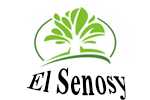
<style>
.page{position:relative;width:150px;height:100px;background:#ffffff}
.page>*{position:absolute;margin:0}
.t1{font:24px "TimesNewRomanPS-BoldMT";color:#000000}
</style>
<div class="page">
<p class="t1" style="left:26px;top:67px;width:100px;height:33px">El Senosy</p>
</div>
